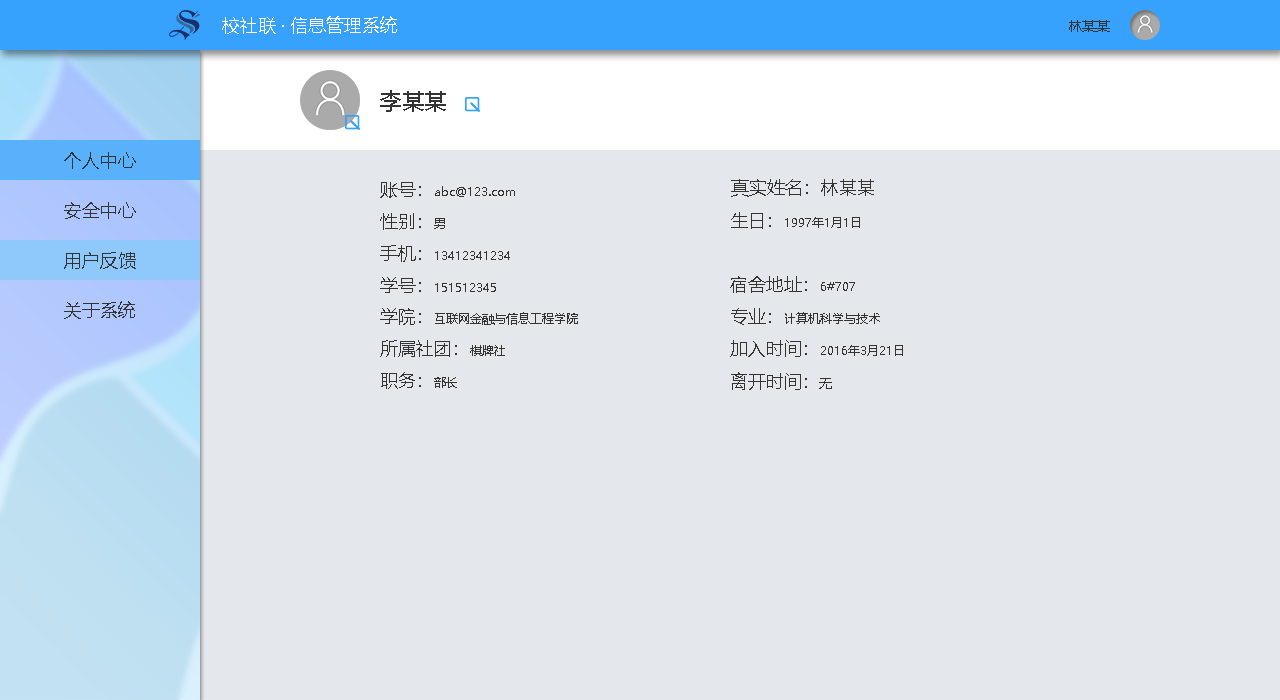
<style>
.page{position:relative;width:1280px;height:700px;background:#e4e8ec}
.page>*{position:absolute;margin:0}
.t1{font:18px "MicrosoftYaHei";color:#ffffff}
.t2{font:14px "MicrosoftYaHei";color:#333333}
.t3{font:22px "MicrosoftYaHei";color:#333333}
.t4{font:18px "MicrosoftYaHei";color:#333333}
.t5{font:12px "MicrosoftYaHei";color:#333333}
</style>
<div class="page">
<p class="t1" style="left:222px;top:16px;width:175px;height:18px">校社联 · 信息管理系统</p>
<p class="t2" style="left:1069px;top:20px;width:41px;height:12px">林某某</p>
<p class="t3" style="left:380px;top:90px;width:66px;height:22px">李某某</p>
<p class="t4" style="left:64px;top:152px;width:72px;height:17px">个人中心</p>
<p class="t5" style="left:380px;top:182px;width:135px;height:16px"><span class="t4">账号：</span>abc@123.com</p>
<p class="t4" style="left:731px;top:179px;width:143px;height:18px">真实姓名：林某某</p>
<p class="t4" style="left:64px;top:202px;width:72px;height:17px">安全中心</p>
<p class="t4" style="left:380px;top:213px;width:65px;height:17px">性别：<span class="t5">男</span></p>
<p class="t5" style="left:731px;top:212px;width:129px;height:17px"><span class="t4">生日：</span>1997年1月1日</p>
<p class="t5" style="left:380px;top:245px;width:130px;height:17px"><span class="t4">手机：</span>13412341234</p>
<p class="t4" style="left:64px;top:252px;width:72px;height:17px">用户反馈</p>
<p class="t5" style="left:380px;top:277px;width:116px;height:16px"><span class="t4">学号：</span>151512345</p>
<p class="t4" style="left:730px;top:276px;width:125px;height:17px">宿舍地址：<span class="t5">6#707</span></p>
<p class="t4" style="left:64px;top:301px;width:71px;height:18px">关于系统</p>
<p class="t5" style="left:380px;top:308px;width:198px;height:17px"><span class="t4">学院：</span>互联网金融与信息工程学院</p>
<p class="t5" style="left:731px;top:308px;width:149px;height:17px"><span class="t4">专业：</span>计算机科学与技术</p>
<p class="t4" style="left:380px;top:340px;width:125px;height:17px">所属社团：<span class="t5">棋牌社</span></p>
<p class="t5" style="left:730px;top:340px;width:173px;height:17px"><span class="t4">加入时间：</span>2016年3月21日</p>
<p class="t4" style="left:381px;top:372px;width:76px;height:17px">职务：<span class="t5">部长</span></p>
<p class="t4" style="left:731px;top:372px;width:101px;height:18px">离开时间：<span class="t5">无</span></p>
</div>
